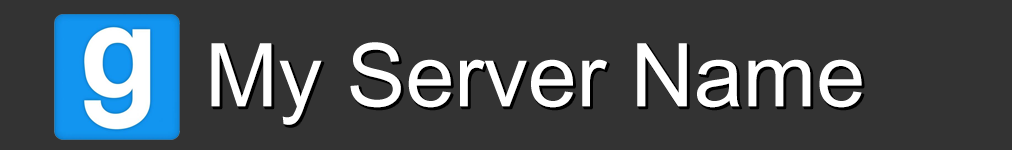
<style>
.page{position:relative;width:1012px;height:150px;background:#333333}
.page>*{position:absolute;margin:0}
.t1{font:88px "DokChampa";color:#ffffff}
</style>
<div class="page">
<p class="t1" style="left:211px;top:42px;width:651px;height:83px">My Server Name</p>
</div>
